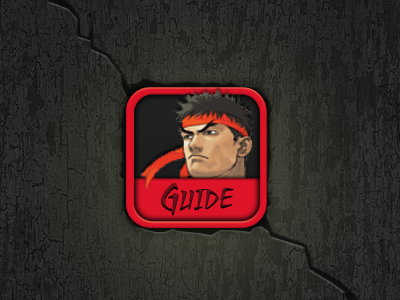
<style>
.page{position:relative;width:400px;height:300px}
.page>*{position:absolute;margin:0}
.t1{font:49px "RagingRedLotusBB-Italic";letter-spacing:-0.01em;font-variant:small-caps;font-weight:bold}
</style>
<div class="page">
<p class="t1" style="left:161px;top:183px;width:73px;height:33px;rotate:-3deg">Guide</p>
</div>
